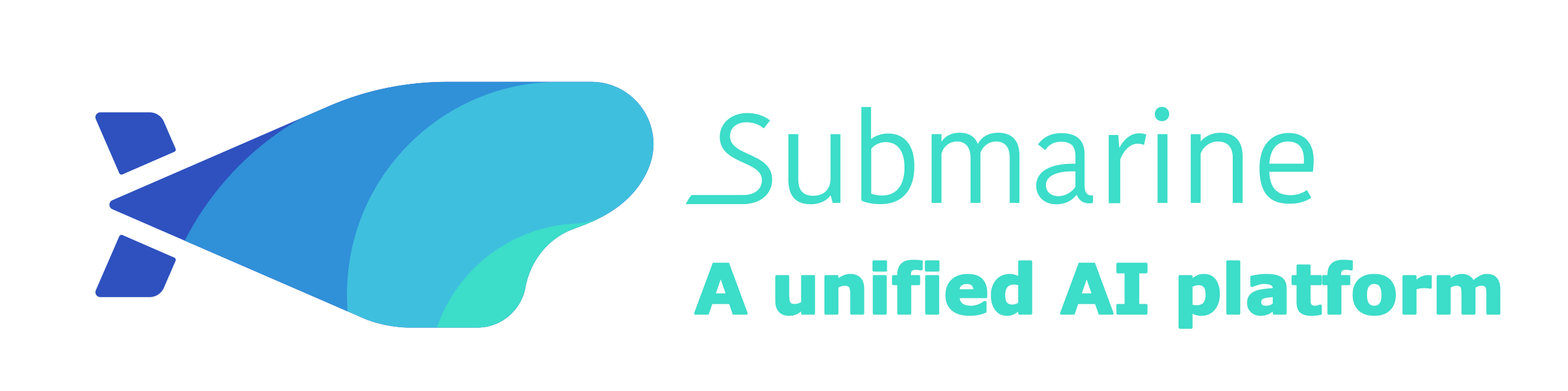
<style>
.page{position:relative;width:1568px;height:391px;background:#ffffff}
.page>*{position:absolute;margin:0}
.t1{font:68.7px "Verdana-Bold";letter-spacing:-0.03em;color:#3cddc9;font-weight:bold}
</style>
<div class="page">
<p class="t1" style="left:694px;top:259px;width:807px;height:70px">A unified AI platform</p>
</div>
